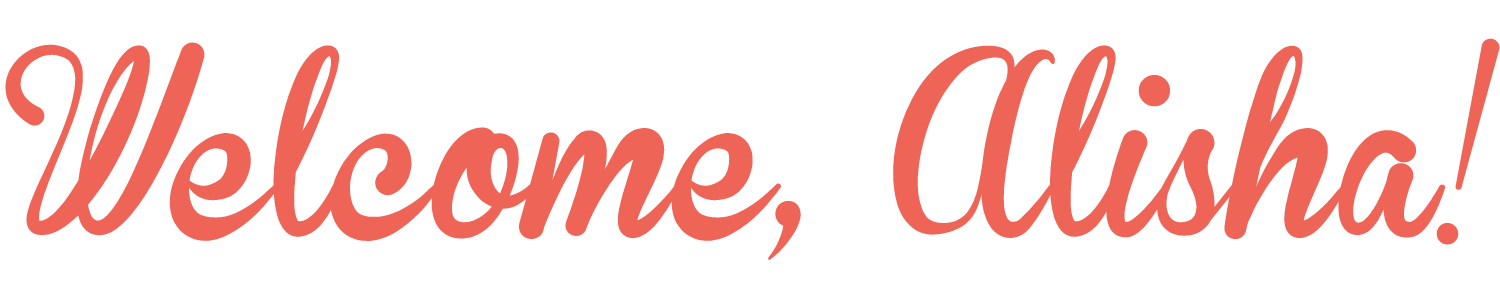
<style>
.page{position:relative;width:1500px;height:300px;background:#ffffff}
.page>*{position:absolute;margin:0}
.t1{font:176.2px "BrannbollFet";color:#ee6557}
</style>
<div class="page">
<p class="t1" style="left:5px;top:38px;width:1495px;height:222px">Welcome, Alisha!</p>
</div>
